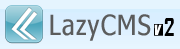
<style>
.page{position:relative;width:180px;height:49px}
.page>*{position:absolute;margin:0}
.t1{font:28px "Nina";letter-spacing:0.05em;color:#5b5c5c}
.t2{font:18px "Haettenschweiler";color:#ffffff;font-style:italic}
.t3{font:24px "AgencyFB-Bold";color:#000000}
</style>
<div class="page">
<p class="t1" style="left:50px;top:14px;width:101px;height:27px">LazyCMS</p>
<p class="t2" style="left:154px;top:24px;width:8px;height:11px">v</p>
<p class="t3" style="left:164px;top:18px;width:10px;height:18px">2</p>
</div>
